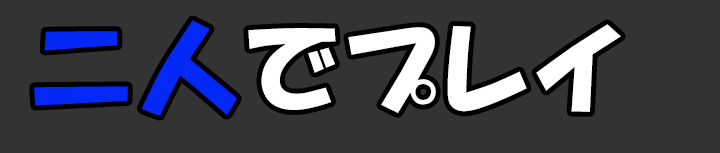
<style>
.page{position:relative;width:720px;height:153px;background:#333333}
.page>*{position:absolute;margin:0}
.t1{font:100px "HGPSoeiKakupoptai";letter-spacing:0.075em;color:#ffffff}
.t2{font:100px "HGPSoeiKakupoptai";letter-spacing:0.075em;color:#0428f5}
</style>
<div class="page">
<p class="t1" style="left:34px;top:20px;width:587px;height:96px"><span class="t2">二人</span>でプレイ</p>
</div>
